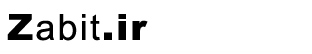
<style>
.page{position:relative;width:312px;height:54px;background:#ffffff}
.page>*{position:absolute;margin:0}
.t1{font:36px "ArialMT";letter-spacing:0.06em;color:#000000}
.t2{font:36px "Arial-Black";letter-spacing:0.06em;color:#000000}
</style>
<div class="page">
<p class="t1" style="left:7px;top:14px;width:141px;height:27px"><span class="t2">Z</span>abit<span class="t2">.ir</span></p>
</div>
